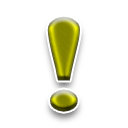
<style>
.page{position:relative;width:128px;height:128px;background:#ffffff}
.page>*{position:absolute;margin:0}
.t1{font:128px "EastMarket"}
</style>
<div class="page">
<p class="t1" style="left:47px;top:16px;width:33px;height:96px">!</p>
</div>
